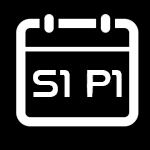
<style>
.page{position:relative;width:150px;height:150px;background:#000000}
.page>*{position:absolute;margin:0}
.t1{font:39.9px "NasalizationRg-Regular";color:#ffffff}
</style>
<div class="page">
<p class="t1" style="left:33px;top:70px;width:89px;height:27px">S1 P1</p>
</div>
